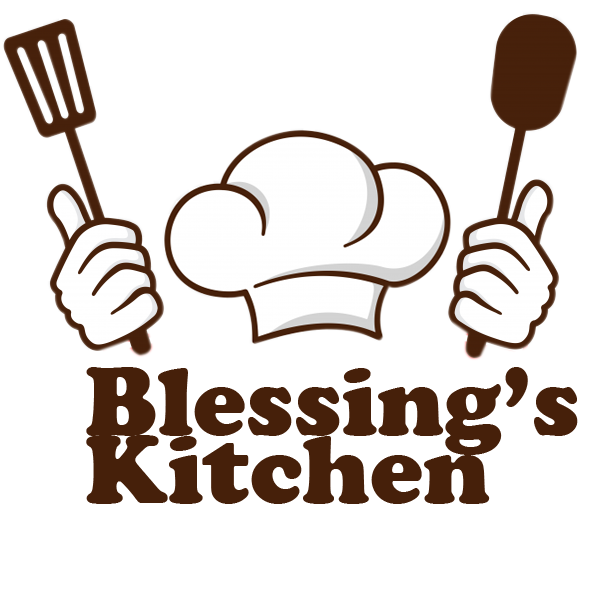
<style>
.page{position:relative;width:600px;height:600px;background:#ffffff}
.page>*{position:absolute;margin:0}
.t1{font:100px "CooperBlack";color:#46200a}
</style>
<div class="page">
<p class="t1" style="left:86px;top:367px;width:492px;height:88px">Blessing’s</p>
<p class="t1" style="left:86px;top:435px;width:404px;height:69px">Kitchen</p>
</div>
